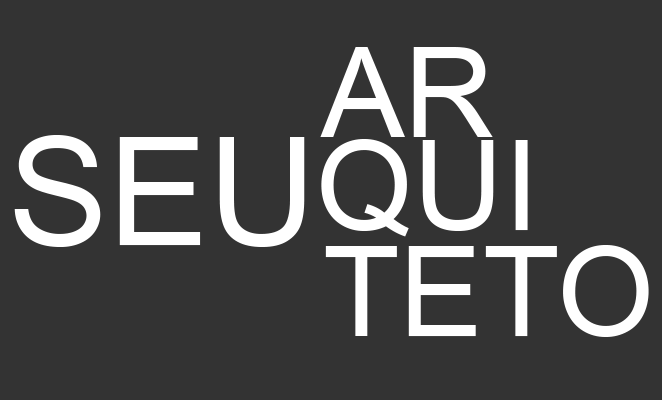
<style>
.page{position:relative;width:662px;height:400px;background:#333333}
.page>*{position:absolute;margin:0}
.t1{font:125px "ArialMT";color:#ffffff}
.t2{font:150px "ArialMT";color:#ffffff}
</style>
<div class="page">
<p class="t1" style="left:320px;top:47px;width:173px;height:90px">AR</p>
<p class="t2" style="left:14px;top:135px;width:291px;height:112px">SEU</p>
<p class="t1" style="left:321px;top:139px;width:207px;height:98px">QUI</p>
<p class="t1" style="left:325px;top:245px;width:324px;height:92px">TETO</p>
</div>
